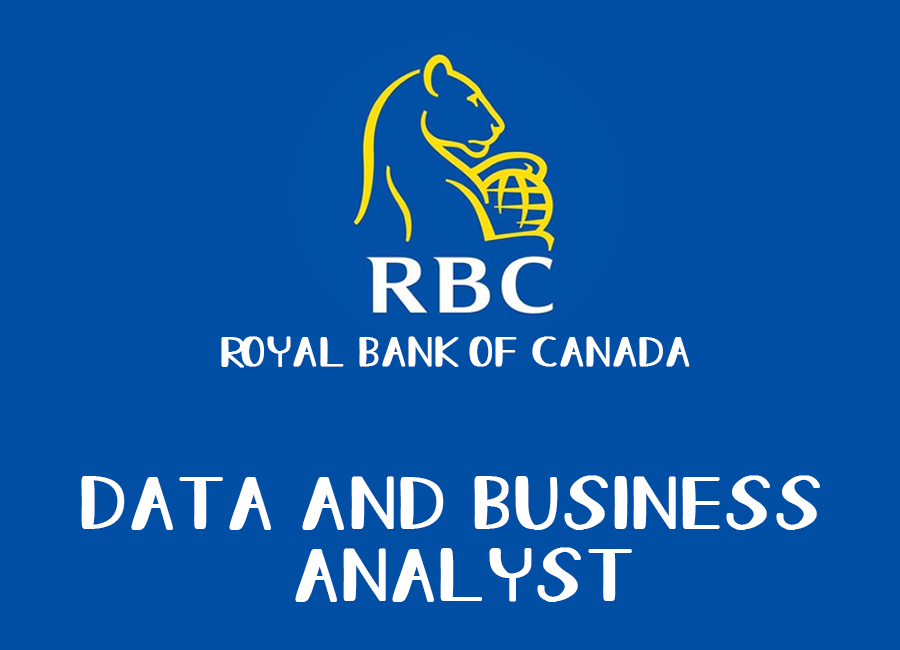
<style>
.page{position:relative;width:900px;height:650px;background:#004fa5}
.page>*{position:absolute;margin:0}
.t1{font:42.1px "AllureOfTheSunRegular";letter-spacing:-0.025em;color:#ffffff;font-weight:bold;scale:1.2 1}
.t2{font:74.3px/72px "AllureOfTheSunRegular";letter-spacing:-0.025em;color:#ffffff;font-weight:bold;scale:1.25 1}
</style>
<div class="page">
<p class="t1" style="left:221px;top:336px;width:469px;height:32px">rOYAL bANK OF cANADA</p>
<p class="t2" style="left:81px;top:475px;width:739px;height:127px;text-align:center">DatA and Business <br>Analyst</p>
</div>
